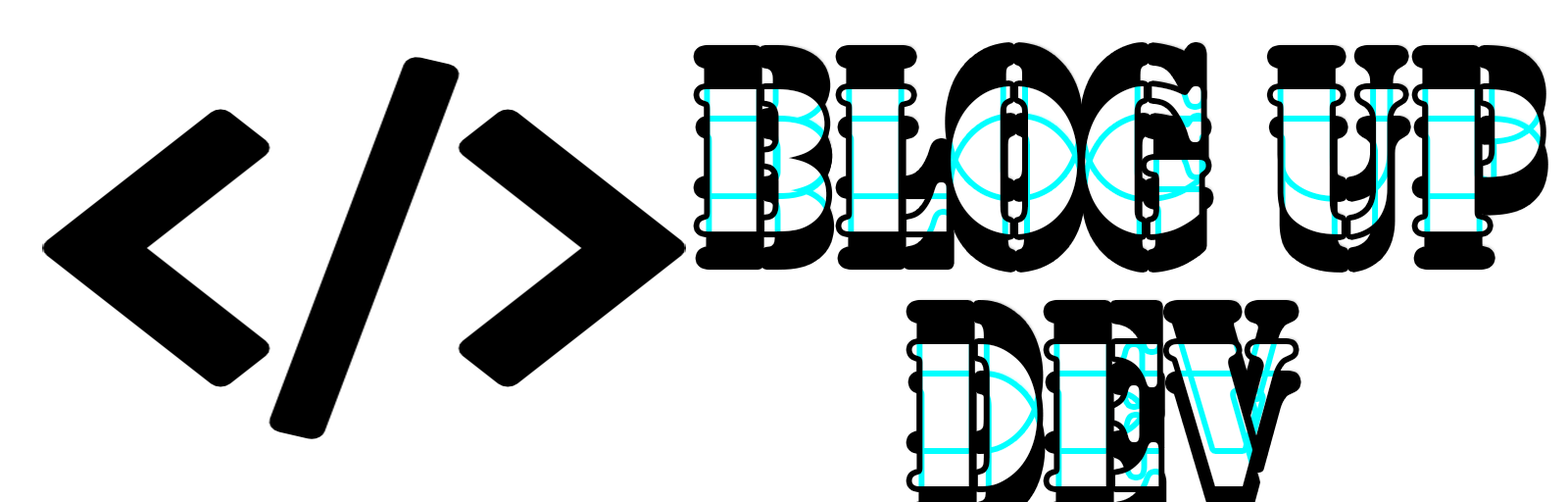
<style>
.page{position:relative;width:1568px;height:502px;background:#ffffff}
.page>*{position:absolute;margin:0}
.t1{font:212.4px "Stencil";color:#fefefe}
</style>
<div class="page">
<p class="t1" style="left:699px;top:86px;width:842px;height:400px">blog up<br>    dev</p>
</div>
